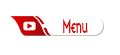
<style>
.page{position:relative;width:120px;height:55px;background:#ffffff}
.page>*{position:absolute;margin:0}
.t1{font:20px "BroadbandICGRegular";letter-spacing:-0.01em;color:#d40505;scale:0.5 1}
</style>
<div class="page">
<p class="t1" style="left:63px;top:18px;width:25px;height:15px">Menu</p>
</div>
